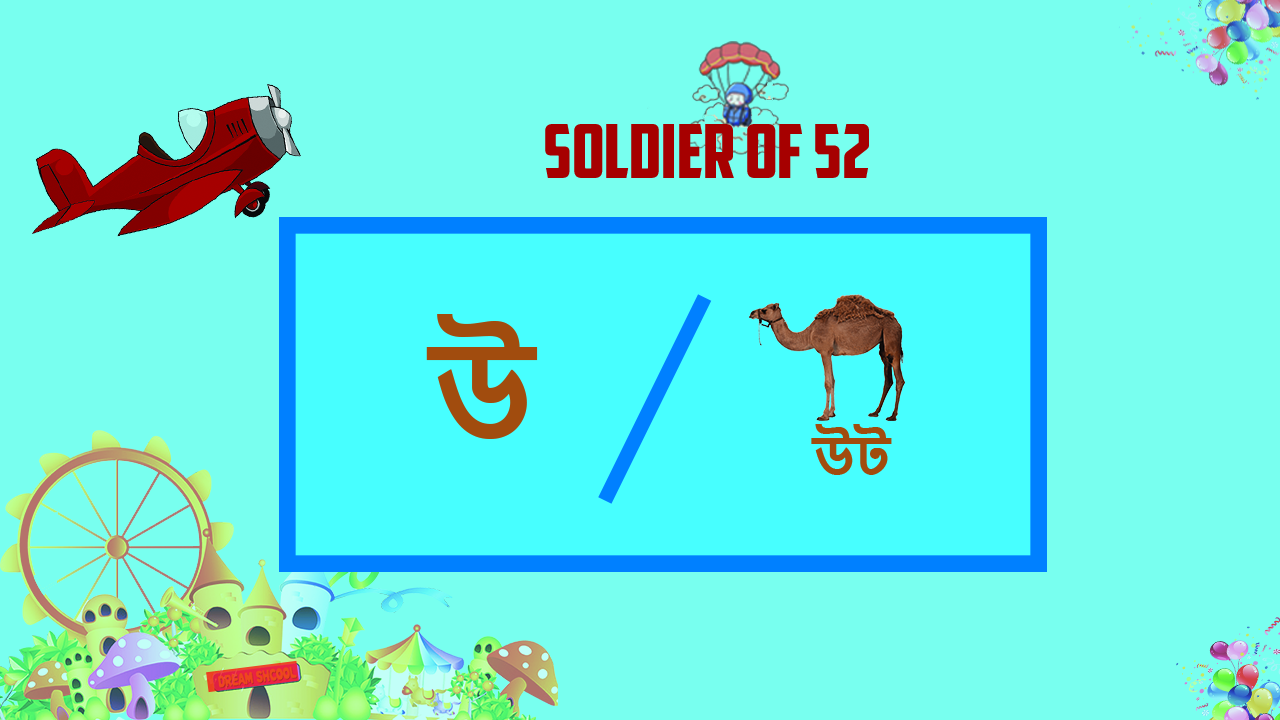
<style>
.page{position:relative;width:1280px;height:720px;background:#78ffef}
.page>*{position:absolute;margin:0}
.t1{font:74.5px "AmericanCaptain";color:#a60000}
.t2{font:122.1px "NirmalaUI-Bold";color:#a24b0d}
.t3{font:49.7px "NirmalaUI-Bold";color:#a24b0d}
</style>
<div class="page">
<p class="t1" style="left:545px;top:124px;width:324px;height:54px">SOLDIER OF 52</p>
<p class="t2" style="left:426px;top:314px;width:112px;height:125px">উ</p>
<p class="t3" style="left:811px;top:424px;width:81px;height:51px">উট</p>
</div>
